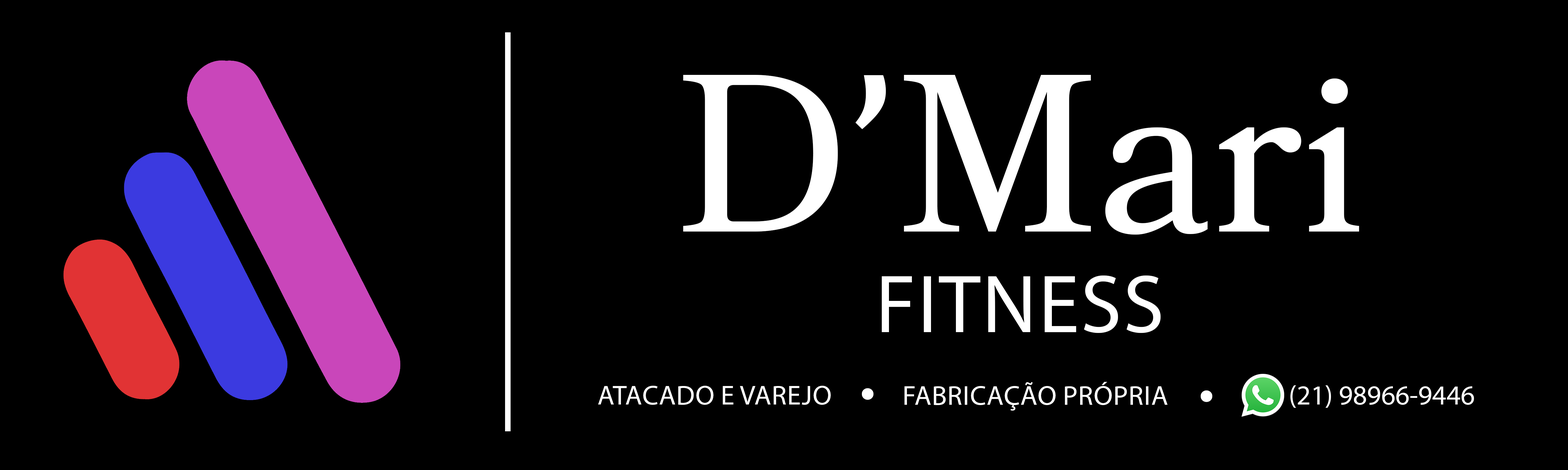
<style>
.page{position:relative;width:1568px;height:470px;background:#000000}
.page>*{position:absolute;margin:0}
.t1{font:224px "Bookmania-Regular";color:#ffffff}
.t2{font:224px "FranklinGothic-Medium";color:#ffffff}
.t3{font:224px "CambriaMath";color:#ffffff}
.t4{font:83px "MyriadPro-Regular";color:#ffffff;text-transform:uppercase}
.t5{font:27.7px "MyriadPro-Regular";color:#ffffff;text-transform:uppercase}
.t6{font:55.3px "MyriadPro-Regular";color:#ffffff}
.t7{font:27.7px "MyriadPro-Regular";color:#ffffff}
</style>
<div class="page">
<p class="t1" style="left:683px;top:75px;width:676px;height:160px"><span class="t2"> </span>D<span class="t3">’</span>Mari</p>
<p class="t4" style="left:882px;top:276px;width:279px;height:57px">Fitness</p>
<p class="t5" style="left:598px;top:386px;width:233px;height:19px">Atacado e varejo</p>
<p class="t6" style="left:862px;top:389px;width:11px;height:11px">•</p>
<p class="t5" style="left:904px;top:382px;width:263px;height:29px">Fabricação própria</p>
<p class="t7" style="left:1290px;top:386px;width:184px;height:22px">(21) 98966-9446</p>
<p class="t6" style="left:1201px;top:391px;width:11px;height:11px">•</p>
</div>
